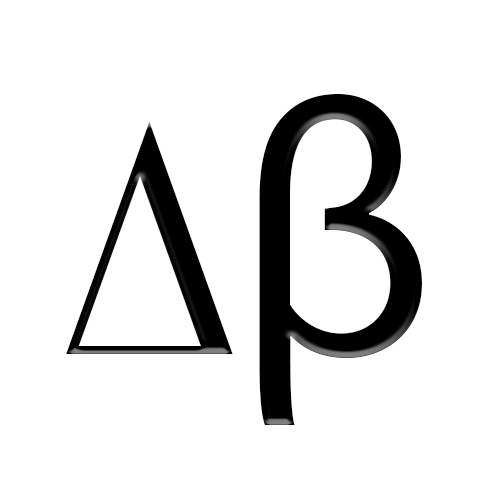
<style>
.page{position:relative;width:500px;height:500px;background:#ffffff}
.page>*{position:absolute;margin:0}
.t1{font:360px "Modern-Regular";color:#000000}
.t2{font:200px "MyriadPro-Regular";color:#000000}
.t3{font:360px "MyriadPro-Regular";color:#000000}
</style>
<div class="page">
<p class="t1" style="left:66px;top:94px;width:356px;height:331px"><span class="t2"> </span>Δ<span class="t3">β</span></p>
</div>
